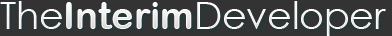
<style>
.page{position:relative;width:392px;height:36px;background:#333333}
.page>*{position:absolute;margin:0}
.t1{font:37.7px "CenturyGothic";color:#ffffff}
.t2{font:37.7px "ArialRoundedMTBold";color:#ffffff}
</style>
<div class="page">
<p class="t1" style="left:0px;top:1px;width:386px;height:35px">The<span class="t2">Interim</span>Developer</p>
</div>
